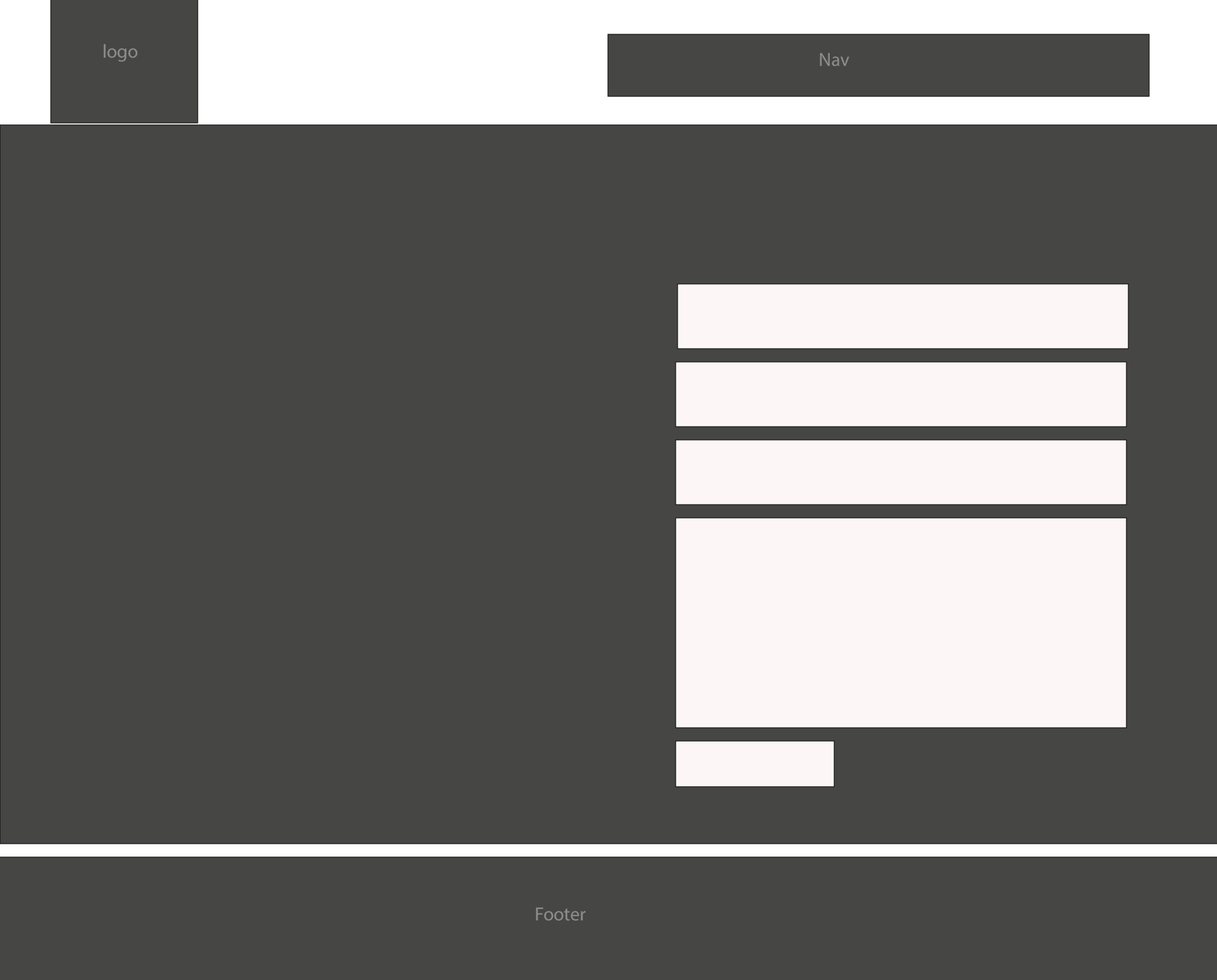
<style>
.page{position:relative;width:1217px;height:980px;background:#464645}
.page>*{position:absolute;margin:0}
.t1{font:19px "MyriadPro-Regular";color:#8c8c8c}
</style>
<div class="page">
<p class="t1" style="left:103px;top:44px;width:35px;height:18px">logo</p>
<p class="t1" style="left:820px;top:53px;width:29px;height:14px">Nav</p>
<p class="t1" style="left:536px;top:907px;width:50px;height:14px">Footer</p>
</div>
